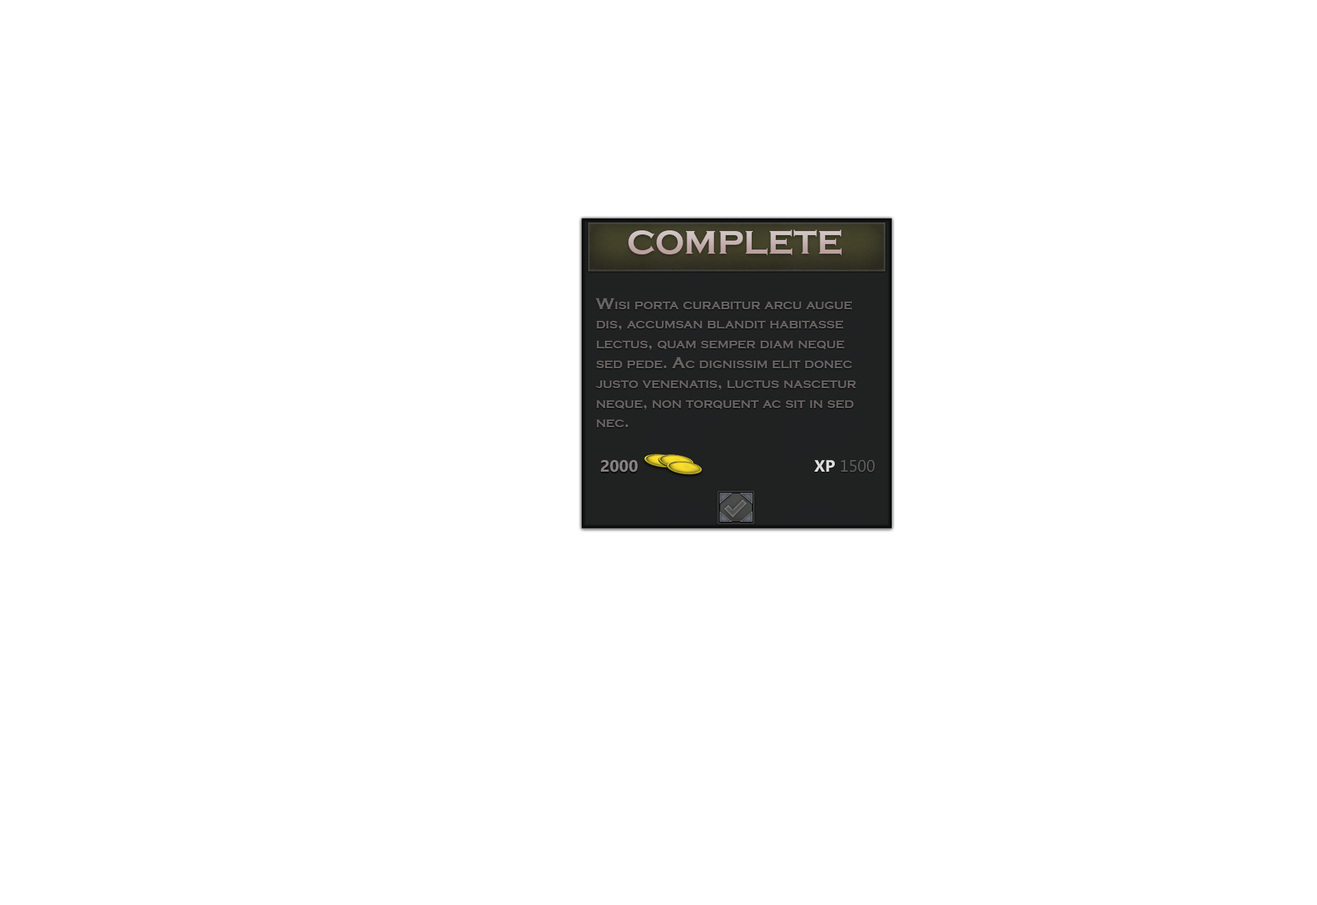
<style>
.page{position:relative;width:1317px;height:905px;background:#ffffff}
.page>*{position:absolute;margin:0}
.t1{font:34.3px "CopperplateGothic-Bold";color:#d1c4c4;font-variant:small-caps}
.t2{font:16.5px "CopperplateGothic-Bold";color:#696363;font-variant:small-caps}
.t3{font:16.5px "NirmalaUI-Bold";color:#888181;font-variant:small-caps}
.t4{font:16.5px "MyanmarText";color:#605d5d;font-variant:small-caps}
.t5{font:16.5px "NirmalaUI-Bold";color:#dfdddd;font-variant:small-caps}
</style>
<div class="page">
<p class="t1" style="left:628px;top:230px;width:214px;height:25px">COMPLETE</p>
<p class="t2" style="left:595px;top:298px;width:261px;height:130px">Wisi porta curabitur arcu augue <br>dis, accumsan blandit habitasse <br>lectus, quam semper diam neque <br>sed pede. Ac dignissim elit donec <br>justo venenatis, luctus nascetur <br>neque, non torquent ac sit in sed <br>nec.</p>
<p class="t3" style="left:601px;top:460px;width:37px;height:13px">2000</p>
<p class="t4" style="left:814px;top:460px;width:61px;height:13px"><span class="t5">XP </span>1500</p>
</div>
